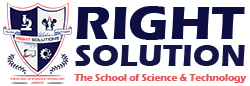
<style>
.page{position:relative;width:250px;height:86px;background:#ffffff}
.page>*{position:absolute;margin:0}
.t1{font:48px "ErasITC-Bold";color:#0d0e41;scale:1.08 1}
.t2{font:31.4px "ErasITC-Bold";color:#141546}
.t3{font:10.4px "ErasITC-Bold";color:#e5575b;scale:0.92 1}
</style>
<div class="page">
<p class="t1" style="left:76px;top:6px;width:169px;height:34px">RIGHT</p>
<p class="t2" style="left:75px;top:45px;width:170px;height:21px">SOLUTION</p>
<p class="t3" style="left:74px;top:74px;width:173px;height:9px">The School of Science &amp; Technology</p>
</div>
